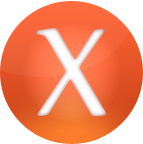
<style>
.page{position:relative;width:143px;height:144px;background:#ffffff}
.page>*{position:absolute;margin:0}
.t1{font:150px "Nyala-Regular";color:#ffffff}
</style>
<div class="page">
<p class="t1" style="left:36px;top:28px;width:71px;height:89px">X</p>
</div>
